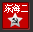
<style>
.page{position:relative;width:33px;height:32px;background:#c50000}
.page>*{position:absolute;margin:0}
.t1{font:10.4px "SimSun";letter-spacing:-0.25em;color:#ffffff}
</style>
<div class="page">
<p class="t1" style="left:4px;top:4px;width:24px;height:9px">东海二</p>
</div>
